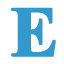
<style>
.page{position:relative;width:64px;height:64px;background:#ffffff}
.page>*{position:absolute;margin:0}
.t1{font:70.8px "TimesNewRomanPS-BoldMT";letter-spacing:-0.05em;color:#3399cc;font-weight:bold}
</style>
<div class="page">
<p class="t1" style="left:11px;top:7px;width:45px;height:50px">E</p>
</div>
